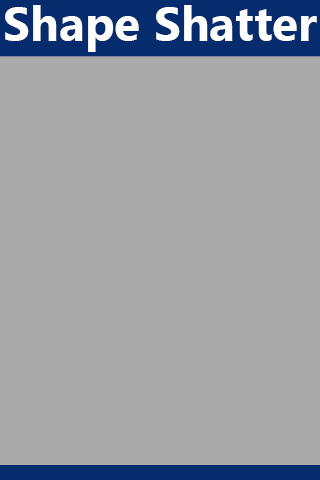
<style>
.page{position:relative;width:320px;height:480px;background:#aaaaaa}
.page>*{position:absolute;margin:0}
.t1{font:48px "LaoUI-Bold";color:#ffffff}
</style>
<div class="page">
<p class="t1" style="left:5px;top:5px;width:312px;height:47px">Shape Shatter</p>
</div>
